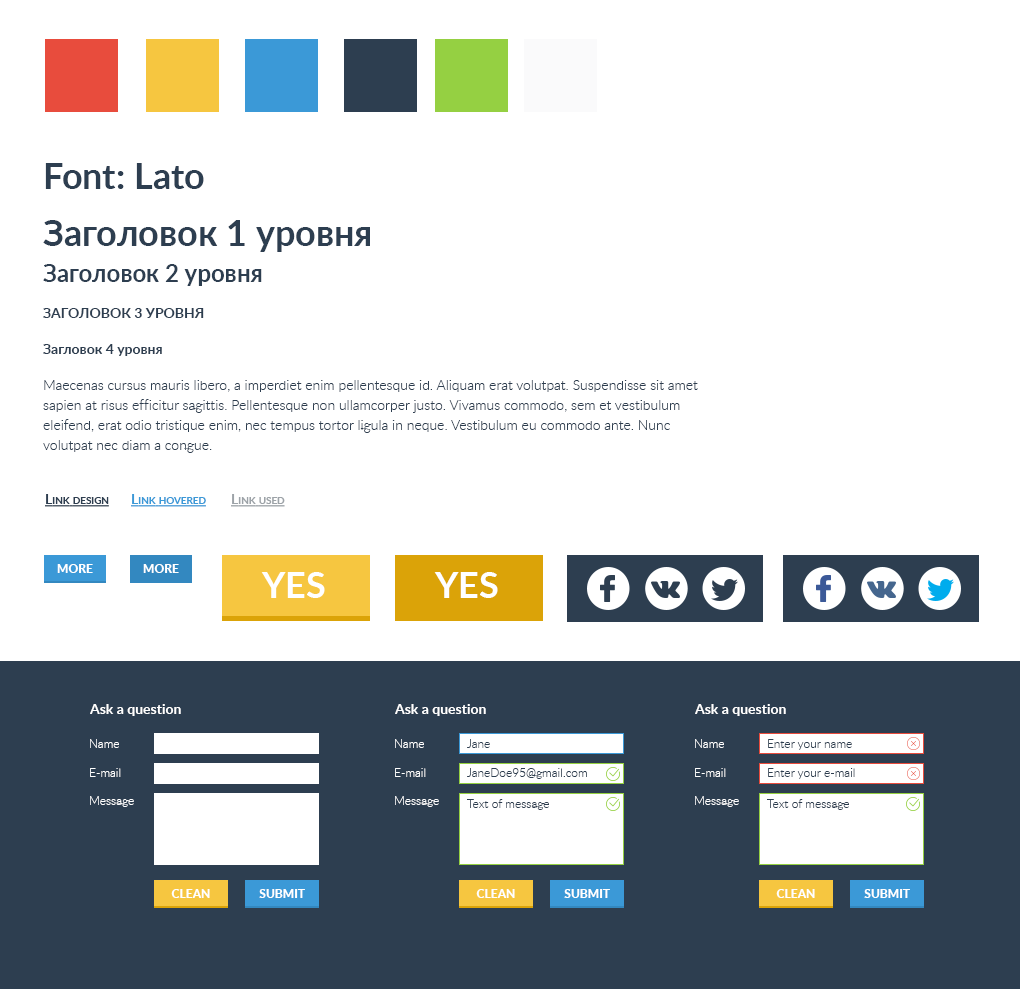
<style>
.page{position:relative;width:1020px;height:989px;background:#ffffff}
.page>*{position:absolute;margin:0}
.t1{font:36px "Lato-Bold";color:#2d3e50}
.t2{font:14px/20px "Lato-Light";color:#2d3e50}
.t3{font:36px/36px "Lato-Bold";color:#2d3e50}
.t4{font:24px/36px "Lato-Bold";color:#2d3e50}
.t5{font:14px/36px "Lato-Bold";color:#2d3e50;text-transform:uppercase}
.t6{font:14px/36px "Lato-Bold";color:#2d3e50}
.t7{font:14px/36px "Lato-Light";color:#2d3e50}
.t8{font:14px "Lato-Bold";color:#2d3e50;font-variant:small-caps;text-decoration:underline}
.t9{font:14px "Lato-Bold";color:#3b99d7;font-variant:small-caps;text-decoration:underline}
.t10{font:14px "Lato-Bold";color:#9da3a8;font-variant:small-caps;text-decoration:underline}
.t11{font:12px "Lato-Heavy";color:#ffffff}
.t12{font:36px "Lato-Bold";color:#ffffff}
.t13{font:14px "Lato-Bold";color:#ffffff}
.t14{font:12px "Lato-Light";color:#ffffff}
.t15{font:12px "Lato-Light";color:#2d3e50}
</style>
<div class="page">
<p class="t1" style="left:45px;top:163px;width:159px;height:26px">Font: Lato</p>
<p class="t2" style="left:43px;top:220px;width:655px;height:233px"><span class="t3">Заголовок 1 уровня<br></span><span class="t4">Заголовок 2 уровня<br></span><span class="t5">Заголовок 3 уровня<br></span><span class="t6">Загловок 4 уровня<br></span><span class="t7">Ma</span>ecenas cursus mauris libero, a imperdiet enim pellentesque id. Aliquam erat volutpat. Suspendisse sit amet sapien at risus efficitur sagittis. Pellentesque non ullamcorper justo. Vivamus commodo, sem et vestibulum eleifend, erat odio tristique enim, nec tempus tortor ligula in neque. Vestibulum eu commodo ante. Nunc volutpat nec diam a congue.</p>
<p class="t8" style="left:45px;top:494px;width:64px;height:13px">Link design</p>
<p class="t9" style="left:131px;top:494px;width:75px;height:13px">Link hovered</p>
<p class="t10" style="left:231px;top:494px;width:54px;height:13px">Link used</p>
<p class="t11" style="left:57px;top:564px;width:36px;height:9px">MORE</p>
<p class="t11" style="left:143px;top:564px;width:36px;height:9px">MORE</p>
<p class="t12" style="left:261px;top:572px;width:64px;height:26px">YES</p>
<p class="t12" style="left:434px;top:572px;width:64px;height:26px">YES</p>
<p class="t13" style="left:90px;top:704px;width:91px;height:12px">Ask a question</p>
<p class="t13" style="left:395px;top:704px;width:91px;height:12px">Ask a question</p>
<p class="t13" style="left:695px;top:704px;width:91px;height:12px">Ask a question</p>
<p class="t14" style="left:90px;top:739px;width:29px;height:9px">Name</p>
<p class="t14" style="left:395px;top:739px;width:29px;height:9px">Name</p>
<p class="t15" style="left:467px;top:739px;width:23px;height:9px">Jane</p>
<p class="t14" style="left:695px;top:739px;width:29px;height:9px">Name</p>
<p class="t15" style="left:768px;top:739px;width:84px;height:11px">Enter your name</p>
<p class="t14" style="left:90px;top:768px;width:31px;height:9px">E-mail</p>
<p class="t14" style="left:395px;top:768px;width:31px;height:9px">E-mail</p>
<p class="t15" style="left:467px;top:768px;width:120px;height:11px">JaneDoe95@gmail.com</p>
<p class="t14" style="left:695px;top:768px;width:31px;height:9px">E-mail</p>
<p class="t15" style="left:768px;top:768px;width:87px;height:11px">Enter your e-mail</p>
<p class="t14" style="left:90px;top:796px;width:44px;height:11px">Message</p>
<p class="t14" style="left:395px;top:796px;width:44px;height:11px">Message</p>
<p class="t14" style="left:695px;top:796px;width:44px;height:11px">Message</p>
<p class="t15" style="left:467px;top:799px;width:82px;height:11px">Text of message</p>
<p class="t15" style="left:767px;top:799px;width:82px;height:11px">Text of message</p>
<p class="t11" style="left:171px;top:889px;width:39px;height:9px">CLEAN</p>
<p class="t11" style="left:259px;top:889px;width:46px;height:9px">SUBMIT</p>
<p class="t11" style="left:476px;top:889px;width:39px;height:9px">CLEAN</p>
<p class="t11" style="left:564px;top:889px;width:46px;height:9px">SUBMIT</p>
<p class="t11" style="left:776px;top:889px;width:39px;height:9px">CLEAN</p>
<p class="t11" style="left:864px;top:889px;width:46px;height:9px">SUBMIT</p>
</div>
